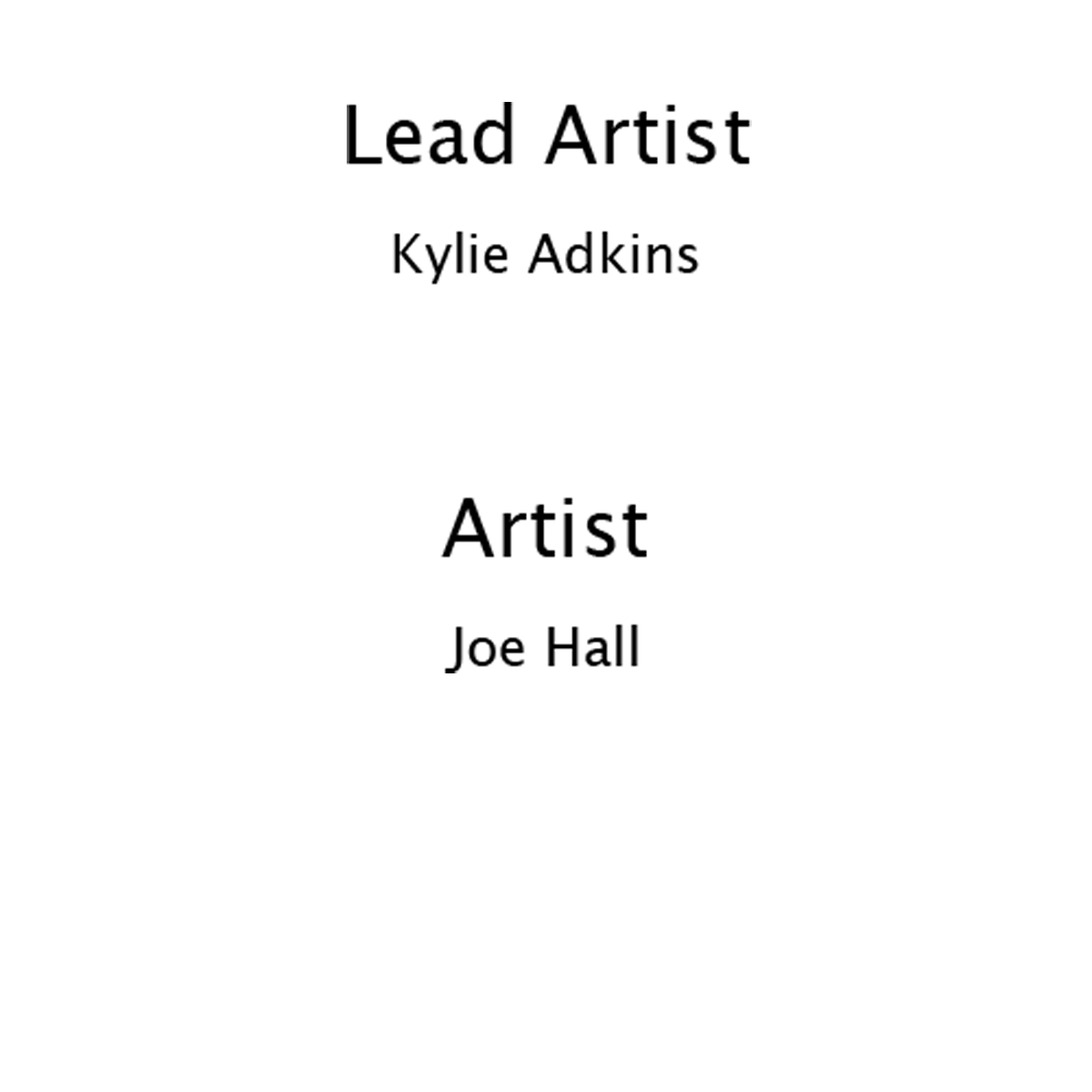
<style>
.page{position:relative;width:1092px;height:1092px;background:#ffffff}
.page>*{position:absolute;margin:0}
.t1{font:52.4px "LucidaGrande";color:#000000}
.t2{font:78.6px "LucidaGrande";color:#9b9b9b}
.t3{font:78.6px "LucidaGrande";color:#000000}
</style>
<div class="page">
<p class="t1" style="left:347px;top:102px;width:405px;height:571px;text-align:center"><span class="t2"><br></span><span class="t3">Lead Artist<br><br></span>Kylie Adkins<br><br><br><br><span class="t3">Artist<br><br></span>Joe Hall</p>
</div>
